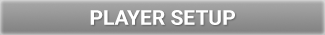
<style>
.page{position:relative;width:325px;height:35px}
.page>*{position:absolute;margin:0}
.t1{font:20.5px "Roboto-Bold";color:#ffffff}
</style>
<div class="page">
<p class="t1" style="left:90px;top:10px;width:145px;height:15px">PLAYER SETUP</p>
</div>
